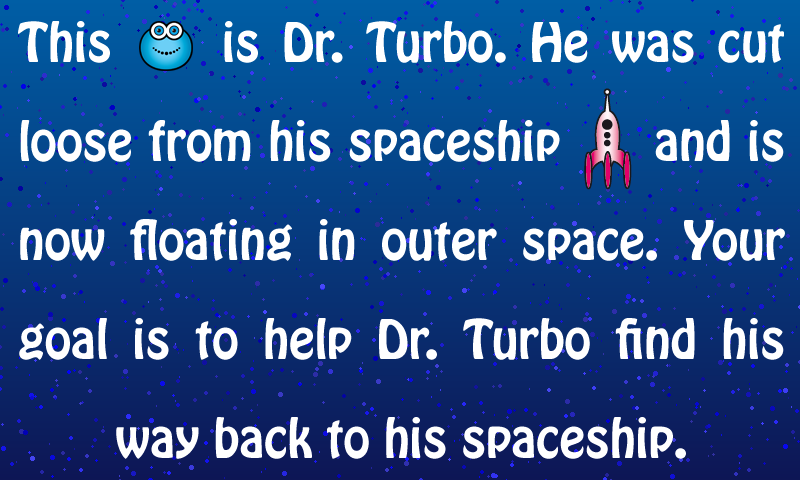
<style>
.page{position:relative;width:800px;height:480px}
.page>*{position:absolute;margin:0}
.t1{font:48px/99px "HoboStd";color:#ffffff}
</style>
<div class="page">
<p class="t1" style="left:18px;top:21px;width:767px;height:438px;text-align:justify">This     is Dr. Turbo. He was cut loose from his spaceship      and is now floating in outer space. Your goal is to help Dr. Turbo find his way back to his spaceship.</p>
</div>
